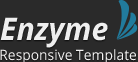
<style>
.page{position:relative;width:138px;height:62px;background:#2a2a2a}
.page>*{position:absolute;margin:0}
.t1{font:31px "OpenSans-BoldItalic";color:#efefef}
.t2{font:14.2px "OpenSans";color:#f4f3f3}
</style>
<div class="page">
<p class="t1" style="left:0px;top:17px;width:108px;height:31px">Enzyme</p>
<p class="t2" style="left:0px;top:49px;width:136px;height:13px">Responsive Template</p>
</div>
